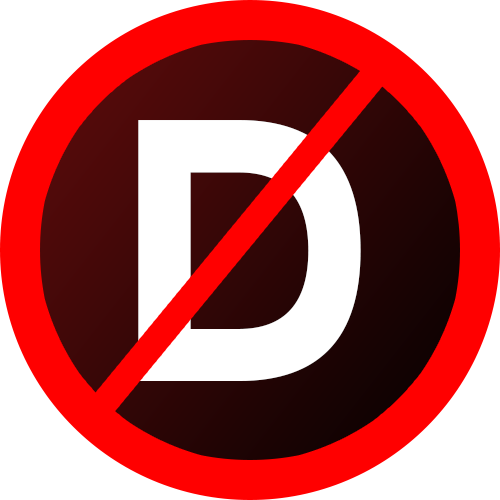
<style>
.page{position:relative;width:500px;height:500px;background:#ffffff}
.page>*{position:absolute;margin:0}
.t1{font:355.7px "nevis-Bold";letter-spacing:0.05em;color:#ffffff}
</style>
<div class="page">
<p class="t1" style="left:138px;top:120px;width:223px;height:261px">D</p>
</div>
